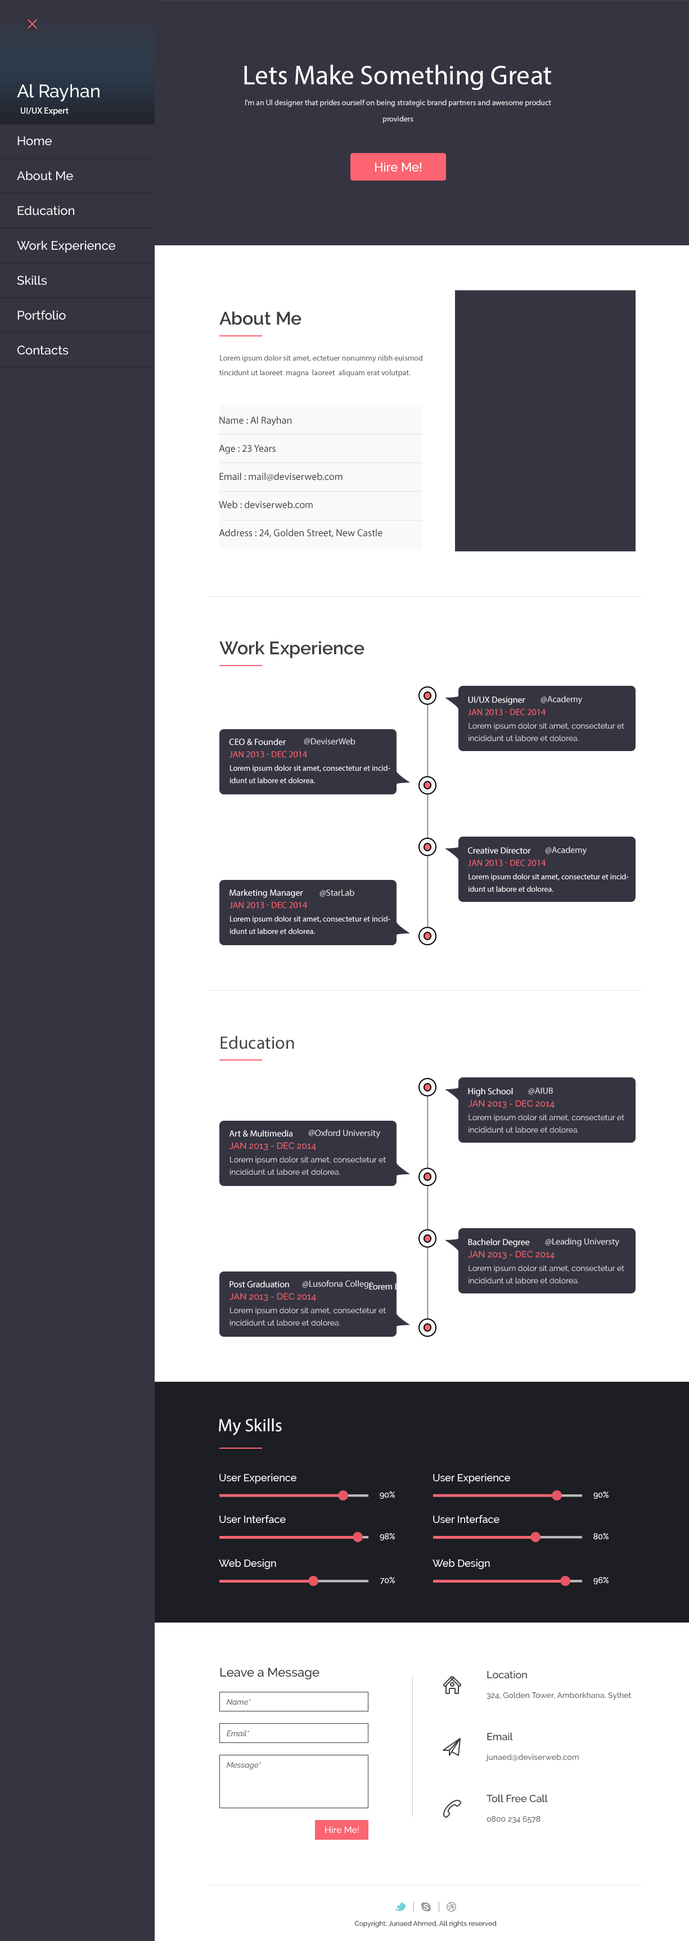
<style>
.page{position:relative;width:689px;height:1941px;background:#ffffff}
.page>*{position:absolute;margin:0}
.t1{font:27px "MyriadPro-Regular";color:#ffffff}
.t2{font:18px "Raleway-Medium";color:#ffffff}
.t3{font:7.9px/16.3px "MyriadPro-Regular";color:#d8d8da}
.t4{font:9px "MyriadPro-Regular";color:#ffffff}
.t5{font:9px "MyriadPro-Regular";color:#ffffff;text-transform:uppercase}
.t6{font:12.4px/34.9px "Raleway-Medium";color:#ffffff}
.t7{font:12.4px "Raleway-Medium";color:#ffffff}
.t8{font:18px "Raleway-SemiBold";color:#3e3e3e}
.t9{font:7.9px/14.6px "MyriadPro-Regular";color:#747474}
.t10{font:10.1px/28.1px "MyriadPro-Regular";color:#3e3e3e}
.t11{font:9px "MyriadPro-Regular";color:#e1e1e2}
.t12{font:9px "MyriadPro-Regular";color:#fb6470;text-transform:uppercase}
.t13{font:7.9px/12.4px "Raleway-Regular";color:#ffffff}
.t14{font:9px "MyriadPro-Regular";color:#e1e1e2;text-transform:uppercase}
.t15{font:7.9px/12.4px "MyriadPro-Regular";color:#ffffff}
.t16{font:18px "MyriadPro-Regular";color:#3e3e3e}
.t17{font:9px "Raleway-Medium";color:#fb6470;text-transform:uppercase}
.t18{font:18px "MyriadPro-Regular";color:#ffffff}
.t19{font:10.1px "Raleway-Medium";color:#ffffff}
.t20{font:7.9px "Raleway-Medium";color:#ffffff}
.t21{font:12.4px "Raleway-Medium";color:#3e3e3e}
.t22{font:10.1px "Raleway-Medium";color:#3e3e3e}
.t23{font:7.9px "Raleway-Medium";color:#656565}
.t24{font:7.9px "Raleway-MediumItalic";color:#656565}
.t25{font:9px "Raleway-Medium";color:#ffffff}
.t26{font:6.8px "Raleway-Medium";color:#3e3e3e}
</style>
<div class="page">
<p class="t1" style="left:244px;top:65px;width:307px;height:25px">Lets Make Something Great</p>
<p class="t2" style="left:17px;top:84px;width:83px;height:18px">Al Rayhan</p>
<p class="t3" style="left:245px;top:100px;width:306px;height:23px;text-align:center">I’m an UI designer that prides ourself on being strategic brand partners and awesome product providers</p>
<p class="t4" style="left:21px;top:107px;width:48px;height:8px"><span class="t5">Ui/ux</span> Expert</p>
<p class="t6" style="left:17px;top:136px;width:98px;height:219px">Home<br>About Me<br>Education<br>Work Experience<br>Skills<br>Portfolio<br>Contacts</p>
<p class="t7" style="left:375px;top:163px;width:46px;height:9px">Hire Me!</p>
<p class="t8" style="left:219px;top:311px;width:83px;height:14px">About Me</p>
<p class="t9" style="left:219px;top:355px;width:203px;height:22px">Lorem ipsum dolor sit amet, ectetuer nonummy nibh euismod tincidunt ut laoreet  magna  laoreet  aliquam erat volutpat.</p>
<p class="t10" style="left:219px;top:416px;width:163px;height:122px">Name : Al Rayhan<br>Age : 23 Years<br>Email : mail@deviserweb.com<br>Web : deviserweb.com<br>Address : 24, Golden Street, New Castle</p>
<p class="t8" style="left:219px;top:641px;width:145px;height:17px">Work Experience</p>
<p class="t4" style="left:468px;top:696px;width:57px;height:9px">UI/UX Designer</p>
<p class="t11" style="left:541px;top:695px;width:41px;height:9px">@Academy</p>
<p class="t12" style="left:468px;top:709px;width:78px;height:7px">Jan 2013 - Dec 2014</p>
<p class="t13" style="left:469px;top:722px;width:155px;height:19px">Lorem ipsum dolor sit amet, consectetur et incididunt ut labore et dolorea.</p>
<p class="t11" style="left:304px;top:737px;width:52px;height:8px"><span class="t14">@</span>DeviserWeb</p>
<p class="t4" style="left:229px;top:738px;width:57px;height:7px">CEO &amp; Founder</p>
<p class="t12" style="left:230px;top:751px;width:77px;height:7px">Jan 2013 - Dec 2014</p>
<p class="t15" style="left:230px;top:765px;width:160px;height:18px">Lorem ipsum dolor sit amet, consectetur et incididunt ut labore et dolorea.</p>
<p class="t11" style="left:545px;top:846px;width:42px;height:9px">@Academy</p>
<p class="t4" style="left:468px;top:847px;width:63px;height:7px">Creative Director</p>
<p class="t12" style="left:468px;top:860px;width:78px;height:6px">Jan 2013 - Dec 2014</p>
<p class="t15" style="left:469px;top:874px;width:160px;height:18px">Lorem ipsum dolor sit amet, consectetur et incididunt ut labore et dolorea.</p>
<p class="t4" style="left:230px;top:889px;width:73px;height:9px">Marketing Manager</p>
<p class="t11" style="left:320px;top:889px;width:34px;height:8px">@StarLab</p>
<p class="t12" style="left:230px;top:902px;width:77px;height:6px">Jan 2013 - Dec 2014</p>
<p class="t15" style="left:230px;top:916px;width:160px;height:18px">Lorem ipsum dolor sit amet, consectetur et incididunt ut labore et dolorea.</p>
<p class="t16" style="left:220px;top:1036px;width:74px;height:13px">Education</p>
<p class="t4" style="left:468px;top:1087px;width:45px;height:9px">High School</p>
<p class="t11" style="left:528px;top:1087px;width:25px;height:8px">@AIUB</p>
<p class="t17" style="left:468px;top:1100px;width:87px;height:8px">Jan 2013 - Dec 2014</p>
<p class="t13" style="left:469px;top:1114px;width:155px;height:19px">Lorem ipsum dolor sit amet, consectetur et incididunt ut labore et dolorea.</p>
<p class="t4" style="left:229px;top:1130px;width:63px;height:7px">Art &amp; Multimedia</p>
<p class="t11" style="left:308px;top:1129px;width:72px;height:9px"><span class="t14">@</span>Oxford University</p>
<p class="t17" style="left:230px;top:1142px;width:86px;height:8px">Jan 2013 - Dec 2014</p>
<p class="t13" style="left:230px;top:1156px;width:156px;height:19px">Lorem ipsum dolor sit amet, consectetur et incididunt ut labore et dolorea.</p>
<p class="t4" style="left:468px;top:1238px;width:62px;height:9px">Bachelor Degree</p>
<p class="t11" style="left:545px;top:1238px;width:74px;height:8px">@Leading Universty</p>
<p class="t17" style="left:468px;top:1250px;width:87px;height:9px">Jan 2013 - Dec 2014</p>
<p class="t13" style="left:469px;top:1264px;width:155px;height:20px">Lorem ipsum dolor sit amet, consectetur et incididunt ut labore et dolorea.</p>
<p class="t4" style="left:230px;top:1280px;width:59px;height:8px">Post Graduation</p>
<p class="t11" style="left:302px;top:1280px;width:72px;height:9px">@Lusofona College</p>
<p class="t4" style="left:369px;top:1283px;width:48px;height:9px">Lorem Ipsum</p>
<p class="t17" style="left:230px;top:1293px;width:86px;height:8px">Jan 2013 - Dec 2014</p>
<p class="t13" style="left:230px;top:1307px;width:156px;height:19px">Lorem ipsum dolor sit amet, consectetur et incididunt ut labore et dolorea.</p>
<p class="t18" style="left:219px;top:1418px;width:63px;height:17px">My Skills</p>
<p class="t19" style="left:219px;top:1473px;width:77px;height:10px">User Experience</p>
<p class="t19" style="left:433px;top:1473px;width:77px;height:10px">User Experience</p>
<p class="t20" style="left:380px;top:1491px;width:15px;height:7px">90%</p>
<p class="t20" style="left:593px;top:1491px;width:16px;height:7px">90%</p>
<p class="t19" style="left:219px;top:1515px;width:67px;height:8px">User Interface</p>
<p class="t19" style="left:433px;top:1515px;width:67px;height:8px">User Interface</p>
<p class="t20" style="left:380px;top:1533px;width:15px;height:7px">98%</p>
<p class="t20" style="left:593px;top:1533px;width:16px;height:6px">80%</p>
<p class="t19" style="left:219px;top:1559px;width:57px;height:10px">Web Design</p>
<p class="t19" style="left:433px;top:1559px;width:57px;height:10px">Web Design</p>
<p class="t20" style="left:380px;top:1577px;width:15px;height:7px">70%</p>
<p class="t20" style="left:593px;top:1577px;width:16px;height:7px">96%</p>
<p class="t21" style="left:220px;top:1667px;width:100px;height:12px">Leave a Message</p>
<p class="t22" style="left:487px;top:1670px;width:40px;height:8px">Location</p>
<p class="t23" style="left:487px;top:1691px;width:145px;height:9px">324, Golden Tower, Amborkhana, Sylhet</p>
<p class="t24" style="left:227px;top:1699px;width:24px;height:6px">Name*</p>
<p class="t24" style="left:227px;top:1730px;width:22px;height:6px">Email*</p>
<p class="t22" style="left:487px;top:1732px;width:26px;height:8px">Email</p>
<p class="t23" style="left:485px;top:1753px;width:94px;height:8px">junaed@deviserweb.com</p>
<p class="t24" style="left:227px;top:1762px;width:34px;height:7px">Message*</p>
<p class="t22" style="left:487px;top:1794px;width:61px;height:8px">Toll Free Call</p>
<p class="t23" style="left:487px;top:1816px;width:54px;height:6px">0800 234 6578</p>
<p class="t25" style="left:325px;top:1826px;width:34px;height:7px">Hire Me!</p>
<p class="t26" style="left:355px;top:1920px;width:142px;height:7px">Copyright: Junaed Ahmed, All rights reserved</p>
</div>
